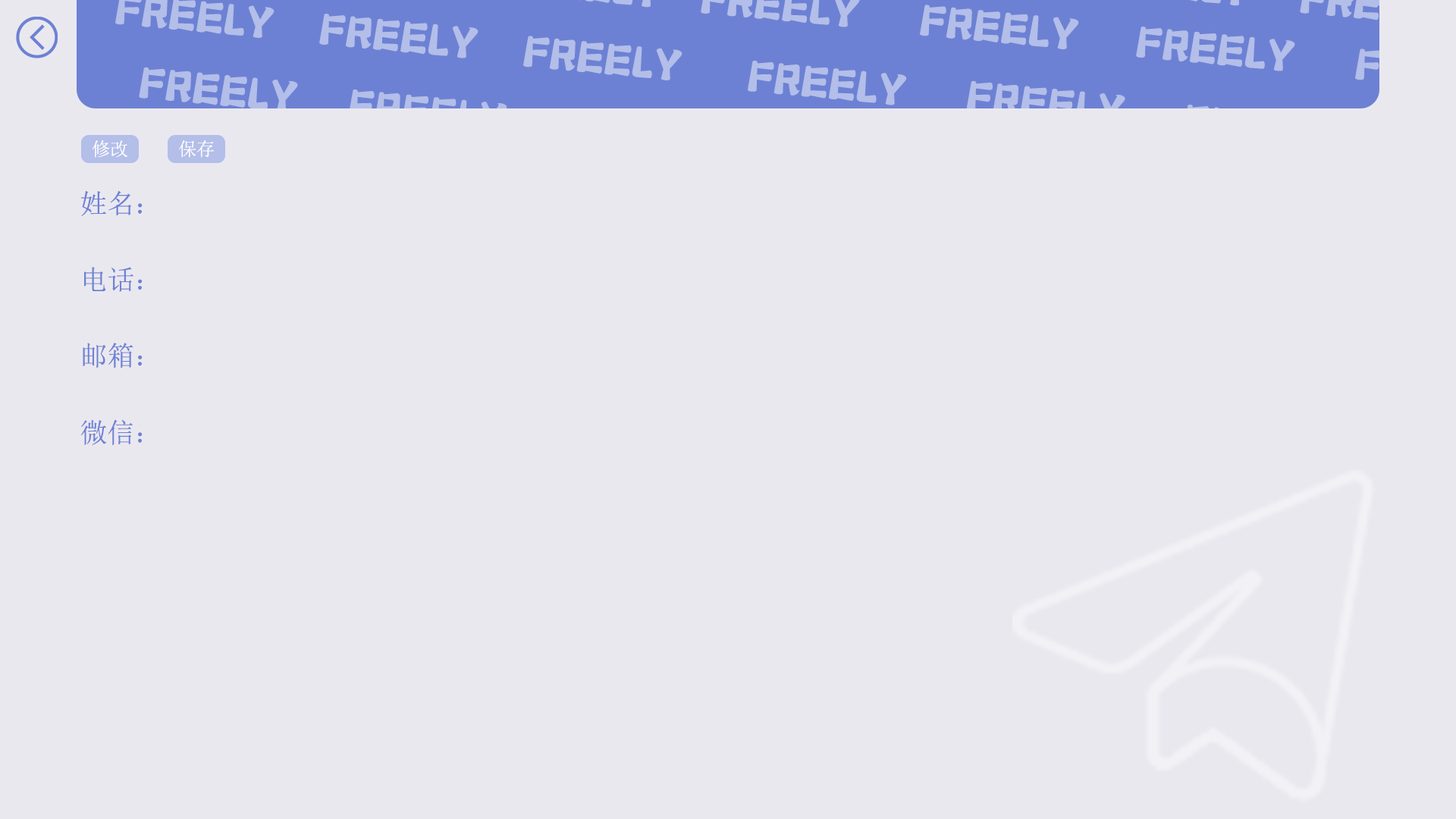
<style>
.page{position:relative;width:1456px;height:819px;background:#eae8ef}
.page>*{position:absolute;margin:0}
.t1{font:54.6px "Bleep";color:#b3bee9}
.t2{font:54.6px "Bleep"}
.t3{font:18.2px "SimSun";color:#ffffff}
.t4{font:27.3px "SimSun";color:#6d81d4}
</style>
<div class="page">
<p class="t1" style="left:920px;top:5px;width:159px;height:44px;rotate:5deg">FREELY</p>
<p class="t1" style="left:319px;top:14px;width:160px;height:44px;rotate:5deg">FREELY</p>
<p class="t1" style="left:1136px;top:27px;width:159px;height:44px;rotate:5deg">FREELY</p>
<p class="t1" style="left:523px;top:36px;width:159px;height:44px;rotate:5deg">FREELY</p>
<p class="t1" style="left:748px;top:61px;width:159px;height:44px;rotate:5deg">FREELY</p>
<p class="t1" style="left:139px;top:67px;width:159px;height:45px;rotate:5deg">FREELY</p>
<p class="t2" style="left:348px;top:89px;width:159px;height:45px;rotate:5deg">FREELY</p>
<p class="t1" style="left:966px;top:80px;width:159px;height:46px;rotate:5deg">FREELY</p>
<p class="t3" style="left:92px;top:140px;width:35px;height:18px">修改</p>
<p class="t3" style="left:179px;top:140px;width:35px;height:18px">保存</p>
<p class="t4" style="left:80px;top:190px;width:63px;height:26px">姓名：</p>
<p class="t4" style="left:84px;top:267px;width:59px;height:25px">电话：</p>
<p class="t4" style="left:83px;top:343px;width:60px;height:26px">邮箱：</p>
<p class="t4" style="left:80px;top:419px;width:63px;height:26px">微信：</p>
</div>
